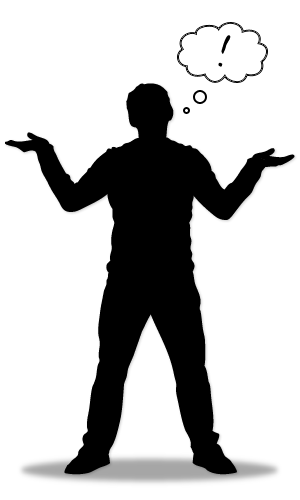
<style>
.page{position:relative;width:300px;height:500px;background:#ffffff}
.page>*{position:absolute;margin:0}
.t1{font:58px "JamesFajardo";color:#000000;text-transform:uppercase}
</style>
<div class="page">
<p class="t1" style="left:218px;top:35px;width:13px;height:32px">!</p>
</div>
